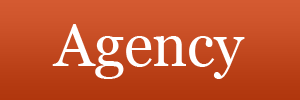
<style>
.page{position:relative;width:300px;height:100px}
.page>*{position:absolute;margin:0}
.t1{font:60px "Georgia";letter-spacing:-0.01em;color:#ffffff}
</style>
<div class="page">
<p class="t1" style="left:52px;top:24px;width:193px;height:55px">Agency</p>
</div>
